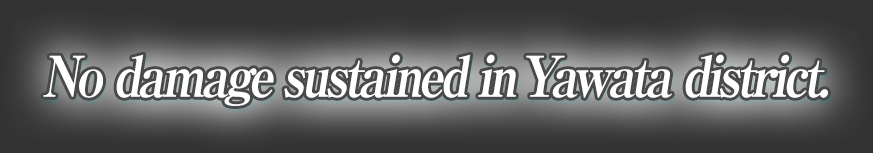
<style>
.page{position:relative;width:873px;height:153px}
.page>*{position:absolute;margin:0}
.t1{font:56px "RyuminPro-ExBold";letter-spacing:-0.08em;color:#ffffff;font-style:italic;scale:0.9 1}
</style>
<div class="page">
<p class="t1" style="left:43px;top:54px;width:785px;height:52px">No damage sustained in Yawata district.</p>
</div>
